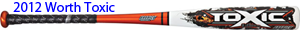
<style>
.page{position:relative;width:300px;height:30px;background:#ffffff}
.page>*{position:absolute;margin:0}
.t1{font:14px "MyriadPro-Regular";color:#0000ff}
</style>
<div class="page">
<p class="t1" style="left:13px;top:2px;width:102px;height:10px">2012 Worth Toxic</p>
</div>
